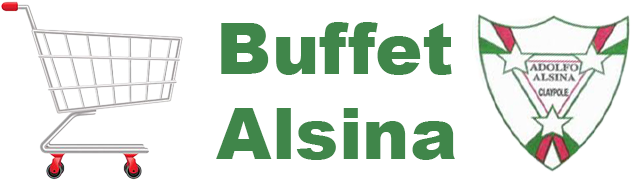
<style>
.page{position:relative;width:639px;height:182px;background:#ffffff}
.page>*{position:absolute;margin:0}
.t1{font:71px "Arial-Black";color:#40864a}
</style>
<div class="page">
<p class="t1" style="left:216px;top:22px;width:239px;height:138px">Buffet<br>Alsina</p>
</div>
